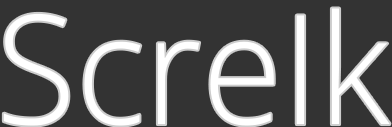
<style>
.page{position:relative;width:392px;height:127px;background:#333333}
.page>*{position:absolute;margin:0}
.t1{font:152.1px "OpenSans-Light";color:#ffffff;scale:0.96 1}
</style>
<div class="page">
<p class="t1" style="left:3px;top:8px;width:387px;height:118px">ScreIk</p>
</div>
